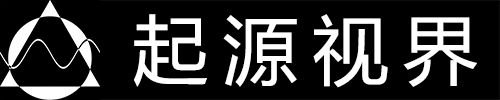
<style>
.page{position:relative;width:500px;height:100px;background:#000000}
.page>*{position:absolute;margin:0}
.t1{font:75px "MicrosoftYaHeiUI";letter-spacing:0.2em;color:#ffffff}
</style>
<div class="page">
<p class="t1" style="left:134px;top:14px;width:343px;height:74px">起源视界</p>
</div>
